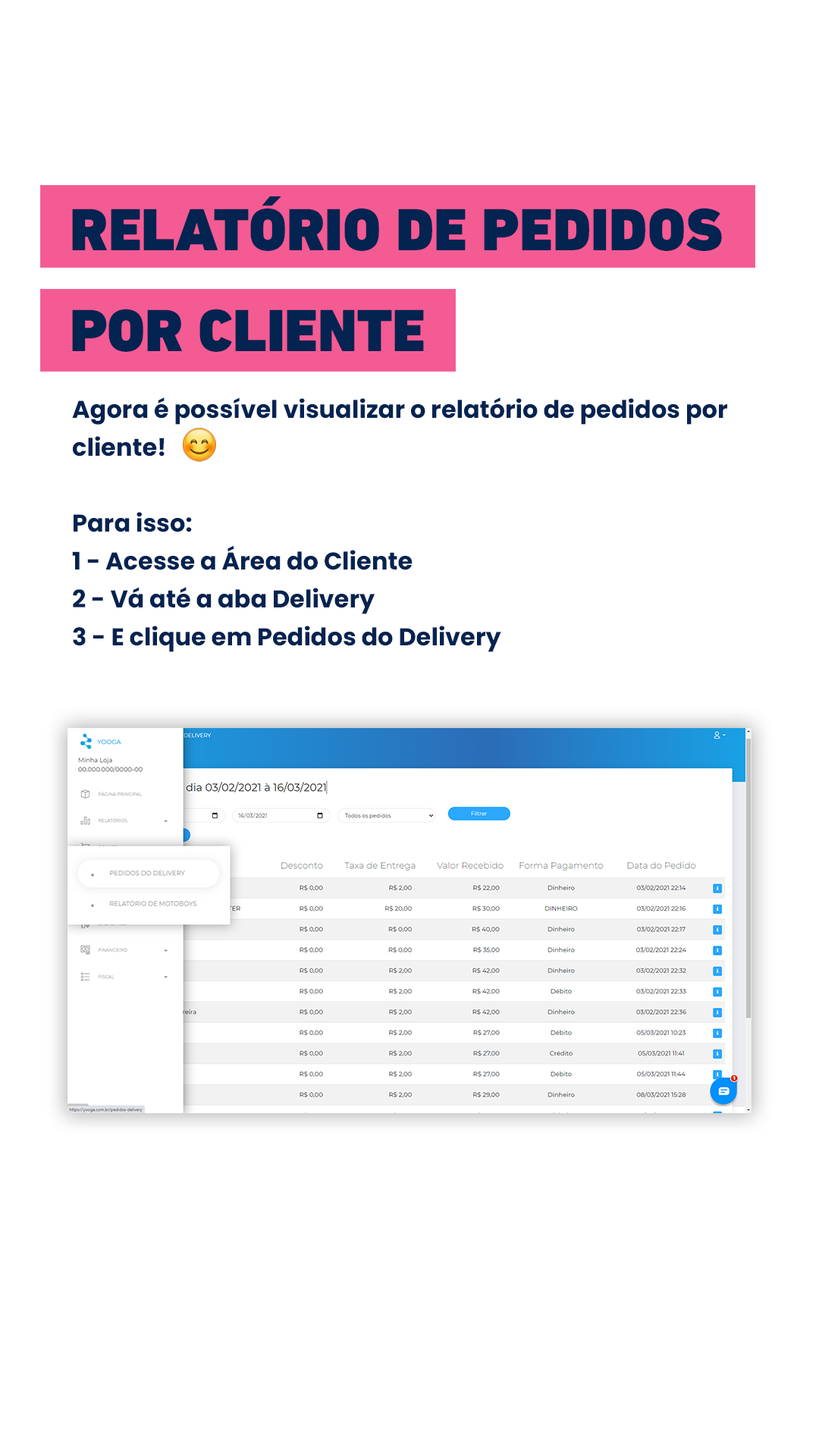
<style>
.page{position:relative;width:819px;height:1456px;background:#ffffff}
.page>*{position:absolute;margin:0}
.t1{font:60.5px "DINNextLTPro-Black";color:#032351;text-transform:uppercase}
.t2{font:24.3px/37.9px "Poppins-Bold";color:#032351}
</style>
<div class="page">
<p class="t1" style="left:72px;top:196px;width:650px;height:55px">Relatório de Pedidos</p>
<p class="t1" style="left:72px;top:309px;width:352px;height:43px">por Cliente</p>
<p class="t2" style="left:72px;top:397px;width:655px;height:255px">Agora é possível visualizar o relatório de pedidos por cliente!<br><br>Para isso:<br>1 - Acesse a Área do Cliente<br>2 - Vá até a aba Delivery<br>3 - E clique em Pedidos do Delivery</p>
</div>
